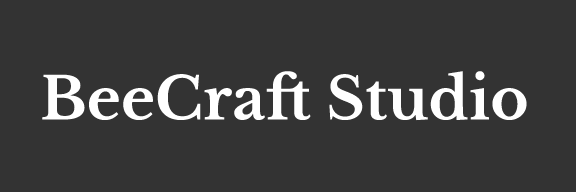
<style>
.page{position:relative;width:576px;height:192px;background:#333333}
.page>*{position:absolute;margin:0}
.t1{font:58.3px "LibreBaskerville-Bold";color:#ffffff}
</style>
<div class="page">
<p class="t1" style="left:42px;top:71px;width:485px;height:50px">BeeCraft Studio</p>
</div>
